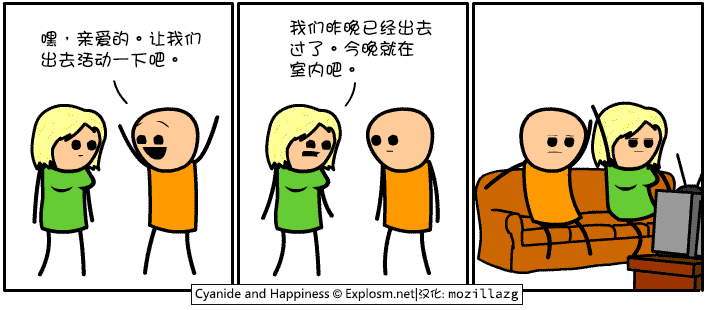
<style>
.page{position:relative;width:708px;height:310px;background:#ffffff}
.page>*{position:absolute;margin:0}
.t1{font:18px/21px "DFGirl";color:#000000}
</style>
<div class="page">
<p class="t1" style="left:41px;top:30px;width:160px;height:38px">嘿，亲爱的。让我们<br>出去活动一下吧。</p>
<p class="t1" style="left:289px;top:19px;width:143px;height:59px">我们昨晚已经出去<br>过了。今晚就在<br>室内吧。</p>
</div>
